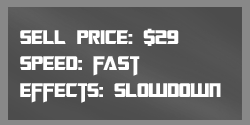
<style>
.page{position:relative;width:250px;height:125px}
.page>*{position:absolute;margin:0}
.t1{font:22px "TransformersMovie";color:#ffffff}
.t2{font:22px "TransformersMovie";letter-spacing:0.02em;color:#ffffff}
.t3{font:22px "TransformersMovie";letter-spacing:-0.08em;color:#ffffff}
</style>
<div class="page">
<p class="t1" style="left:20px;top:28px;width:201px;height:75px">sell p<span class="t2">ri</span>ce: $29<br>spee<span class="t2">d</span>: <span class="t3">f</span><span class="t2">ast<br></span>effects: slowdown</p>
</div>
